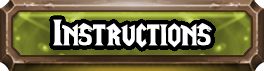
<style>
.page{position:relative;width:264px;height:71px}
.page>*{position:absolute;margin:0}
.t1{font:36.2px "LifeCraft";color:#ffffff}
</style>
<div class="page">
<p class="t1" style="left:53px;top:19px;width:159px;height:29px">Instructions</p>
</div>
